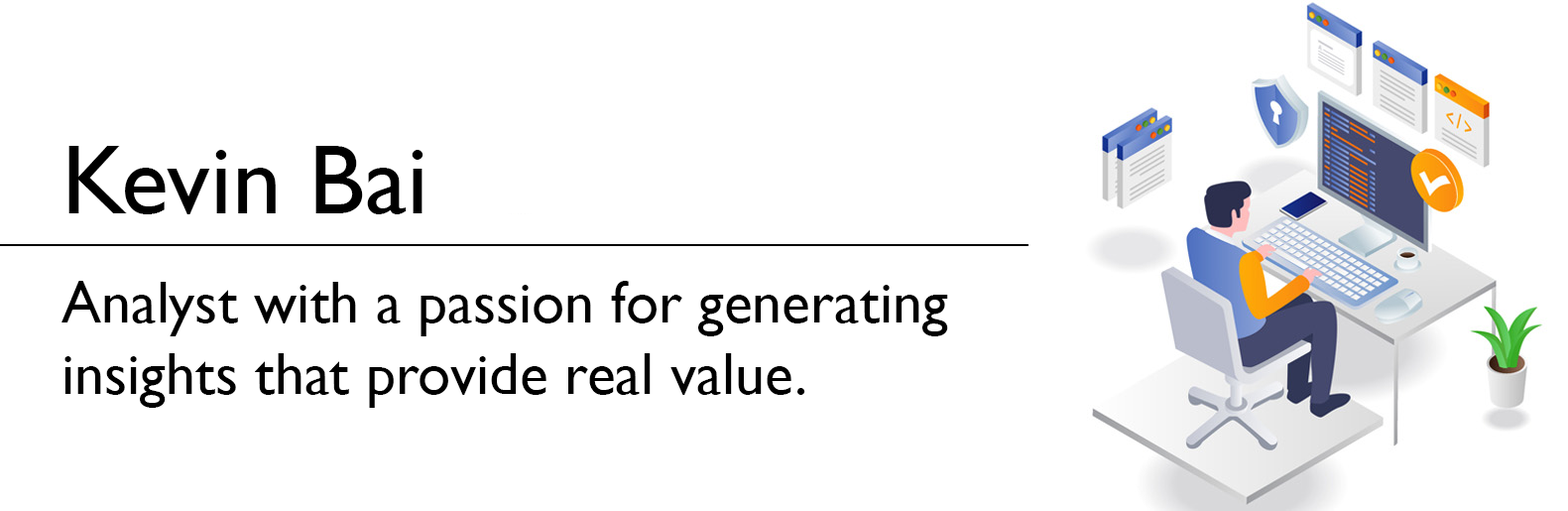
<style>
.page{position:relative;width:1568px;height:511px;background:#ffffff}
.page>*{position:absolute;margin:0}
.t1{font:99.2px "GillSansMT";color:#000000}
.t2{font:59.5px "GillSansMT";color:#000000}
</style>
<div class="page">
<p class="t1" style="left:68px;top:146px;width:355px;height:68px">Kevin Bai</p>
<p class="t2" style="left:61px;top:281px;width:887px;height:127px">Analyst with a passion for generating <br>insights that provide real value.</p>
</div>
